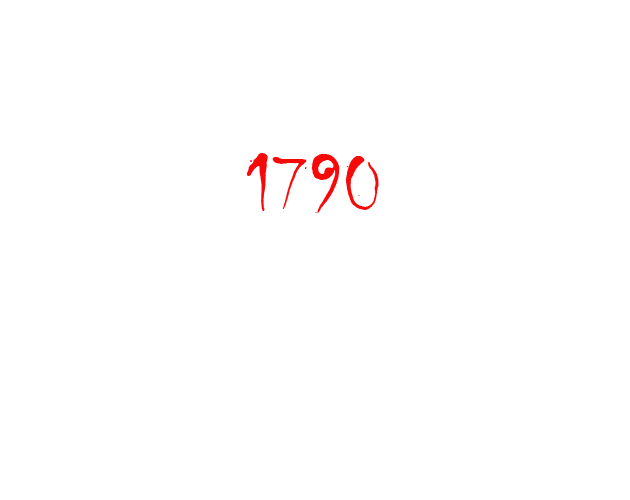
<style>
.page{position:relative;width:630px;height:500px;background:#ffffff}
.page>*{position:absolute;margin:0}
.t1{font:83.3px "Chiller-Regular";color:#f80909}
</style>
<div class="page">
<p class="t1" style="left:246px;top:153px;width:133px;height:60px">1790</p>
</div>
